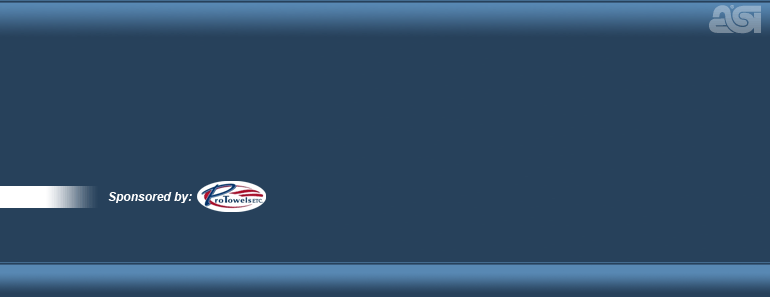
<style>
.page{position:relative;width:770px;height:297px;background:#27415b}
.page>*{position:absolute;margin:0}
.t1{font:12px "Arial-BoldItalicMT";color:#ffffff}
</style>
<div class="page">
<p class="t1" style="left:108px;top:192px;width:84px;height:11px">Sponsored by:</p>
</div>
